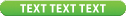
<style>
.page{position:relative;width:126px;height:16px}
.page>*{position:absolute;margin:0}
.t1{font:12px "Myriad-Bold";color:#ffffff}
</style>
<div class="page">
<p class="t1" style="left:20px;top:4px;width:86px;height:9px">TEXT TEXT TEXT</p>
</div>
